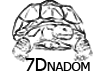
<style>
.page{position:relative;width:101px;height:76px;background:#ffffff}
.page>*{position:absolute;margin:0}
.t1{font:18px "Tahoma";color:#030303;font-variant:small-caps}
</style>
<div class="page">
<p class="t1" style="left:25px;top:58px;width:65px;height:13px">7Dnadom</p>
</div>
